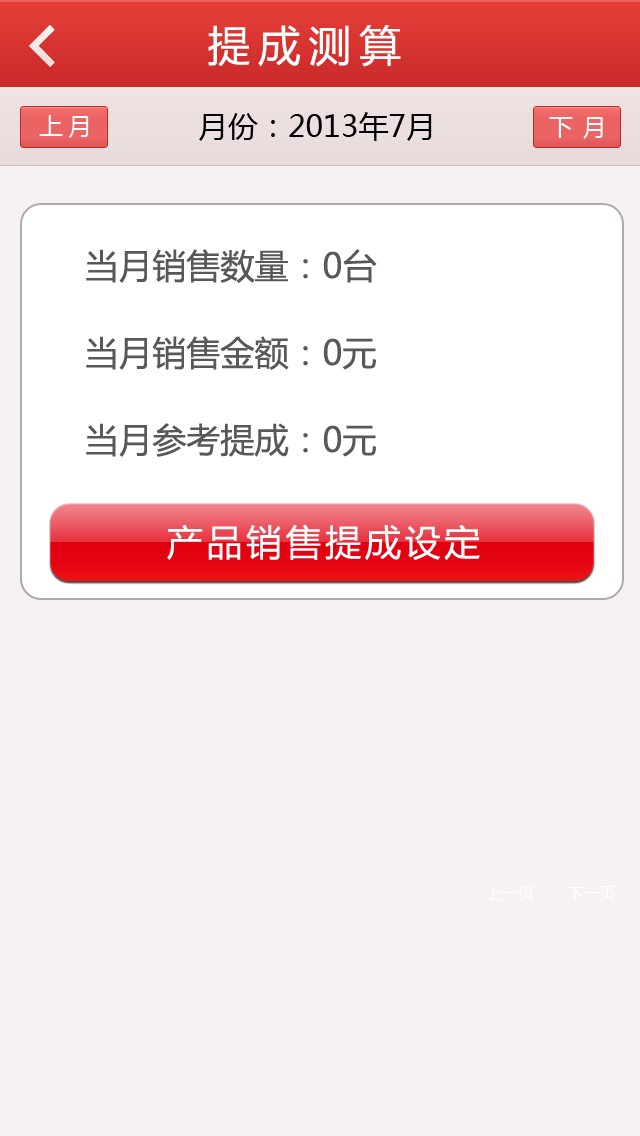
<style>
.page{position:relative;width:640px;height:1136px;background:#f8f1f1}
.page>*{position:absolute;margin:0}
.t1{font:42px "MicrosoftYaHei";letter-spacing:0.2em;color:#ffffff}
.t2{font:30px "MicrosoftYaHei";color:#000000}
.t3{font:24px "MicrosoftYaHei";letter-spacing:0.2em;color:#ffffff}
.t4{font:24px "MicrosoftYaHei";letter-spacing:0.05em;color:#ffffff}
.t5{font:34px/87px "MicrosoftYaHei";color:#585858}
.t6{font:36px "MicrosoftYaHei";letter-spacing:0.1em;color:#ffffff}
.t7{font:16px "MicrosoftYaHei";color:#ffffff}
</style>
<div class="page">
<p class="t1" style="left:208px;top:25px;width:193px;height:42px">提成测算</p>
<p class="t2" style="left:199px;top:112px;width:233px;height:29px">月份：2013年7月</p>
<p class="t3" style="left:39px;top:115px;width:50px;height:23px">上月</p>
<p class="t4" style="left:549px;top:117px;width:54px;height:22px">下 月</p>
<p class="t5" style="left:86px;top:249px;width:291px;height:208px">当月销售数量：0台<br>当月销售金额：0元<br>当月参考提成：0元</p>
<p class="t6" style="left:167px;top:524px;width:313px;height:36px">产品销售提成设定</p>
<p class="t7" style="left:486px;top:886px;width:129px;height:15px">上一页       下一页</p>
</div>
